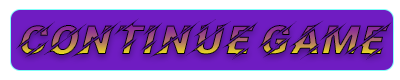
<style>
.page{position:relative;width:400px;height:80px;background:#ffffff}
.page>*{position:absolute;margin:0}
.t1{font:39.7px "Facon"}
</style>
<div class="page">
<p class="t1" style="left:16px;top:18px;width:376px;height:42px">continue Game</p>
</div>
